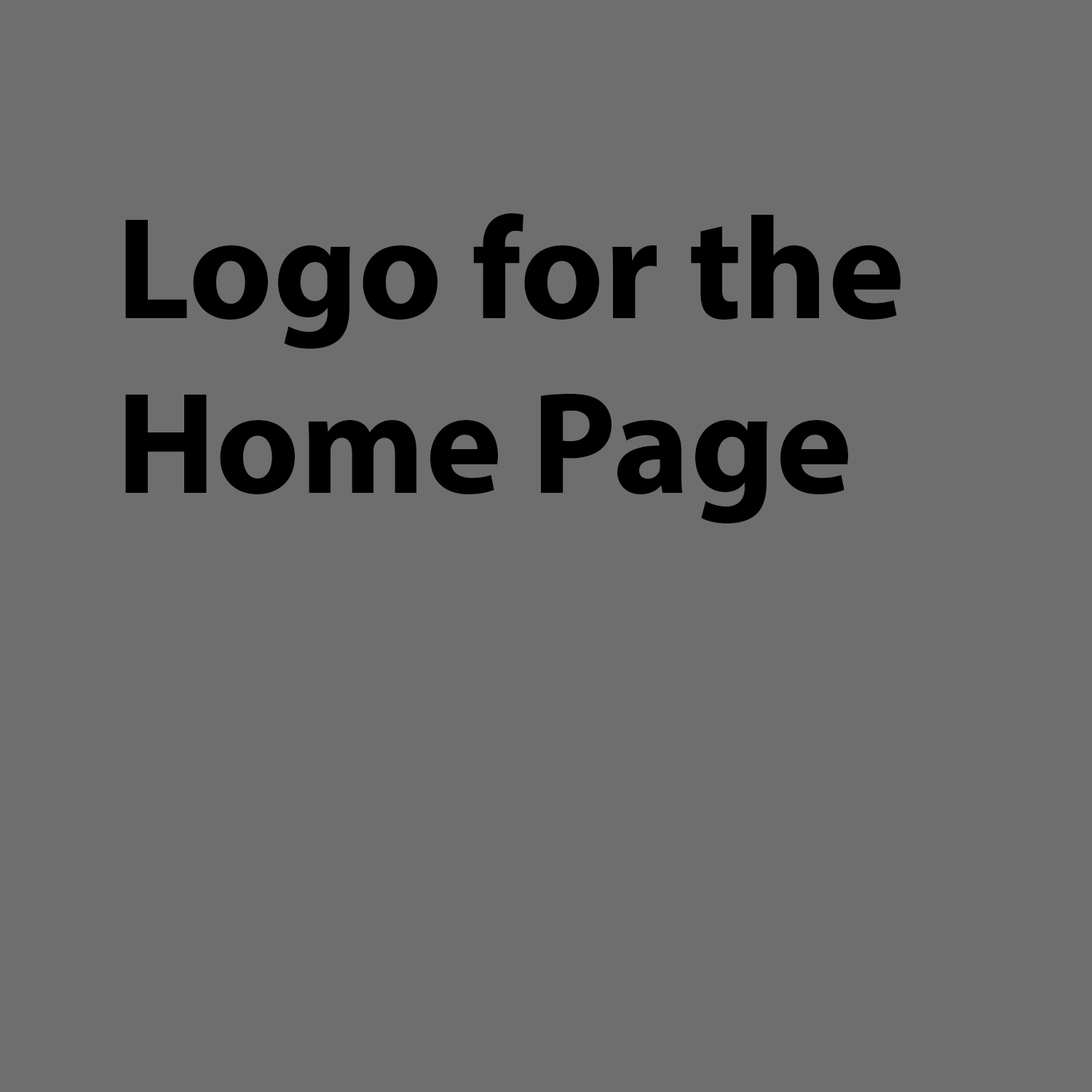
<style>
.page{position:relative;width:1092px;height:1092px;background:#6e6e6e}
.page>*{position:absolute;margin:0}
.t1{font:145.6px "MyriadPro-Bold";color:#000000}
</style>
<div class="page">
<p class="t1" style="left:125px;top:213px;width:776px;height:311px">Logo for the<br>Home Page</p>
</div>
